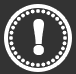
<style>
.page{position:relative;width:76px;height:74px;background:#333333}
.page>*{position:absolute;margin:0}
.t1{font:85.8px "BookmanOldStyle-Bold";color:#ffffff;font-weight:bold}
</style>
<div class="page">
<p class="t1" style="left:33px;top:19px;width:11px;height:36px">!</p>
</div>
